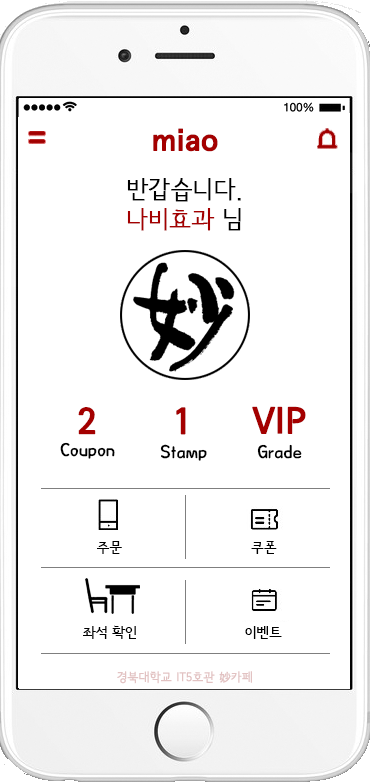
<style>
.page{position:relative;width:370px;height:782px;background:#ffffff}
.page>*{position:absolute;margin:0}
.t1{font:30px "SeoulNamsanEB";color:#a40000;font-weight:bold}
.t2{font:24px/30px "SeoulNamsanL";color:#000000;font-weight:bold}
.t3{font:24px/30px "SeoulNamsanL";color:#a40000;font-weight:bold}
.t4{font:36px "SeoulNamsanB";color:#a40000;font-weight:bold}
.t5{font:18px "THEAlien";color:#000000}
.t6{font:14px "SeoulNamsanB";color:#000000}
.t7{font:12px "SeoulNamsanL";color:#e2c2c2;font-weight:bold}
</style>
<div class="page">
<p class="t1" style="left:153px;top:128px;width:65px;height:24px">miao</p>
<p class="t2" style="left:127px;top:178px;width:114px;height:53px;text-align:center">반갑습니다.<br><span class="t3">나비효과</span> 님</p>
<p class="t4" style="left:78px;top:407px;width:18px;height:28px">2</p>
<p class="t4" style="left:176px;top:407px;width:10px;height:28px">1</p>
<p class="t4" style="left:252px;top:406px;width:54px;height:28px">VIP</p>
<p class="t5" style="left:60px;top:442px;width:55px;height:17px">Coupon</p>
<p class="t5" style="left:160px;top:444px;width:47px;height:17px">Stamp</p>
<p class="t5" style="left:257px;top:444px;width:45px;height:15px">Grade</p>
<p class="t6" style="left:97px;top:541px;width:25px;height:13px">주문</p>
<p class="t6" style="left:251px;top:541px;width:26px;height:13px">쿠폰</p>
<p class="t6" style="left:83px;top:625px;width:53px;height:14px">좌석 확인</p>
<p class="t6" style="left:245px;top:626px;width:37px;height:13px">이벤트</p>
<p class="t7" style="left:117px;top:671px;width:135px;height:13px">경북대학교 IT5호관 妙카페</p>
</div>
